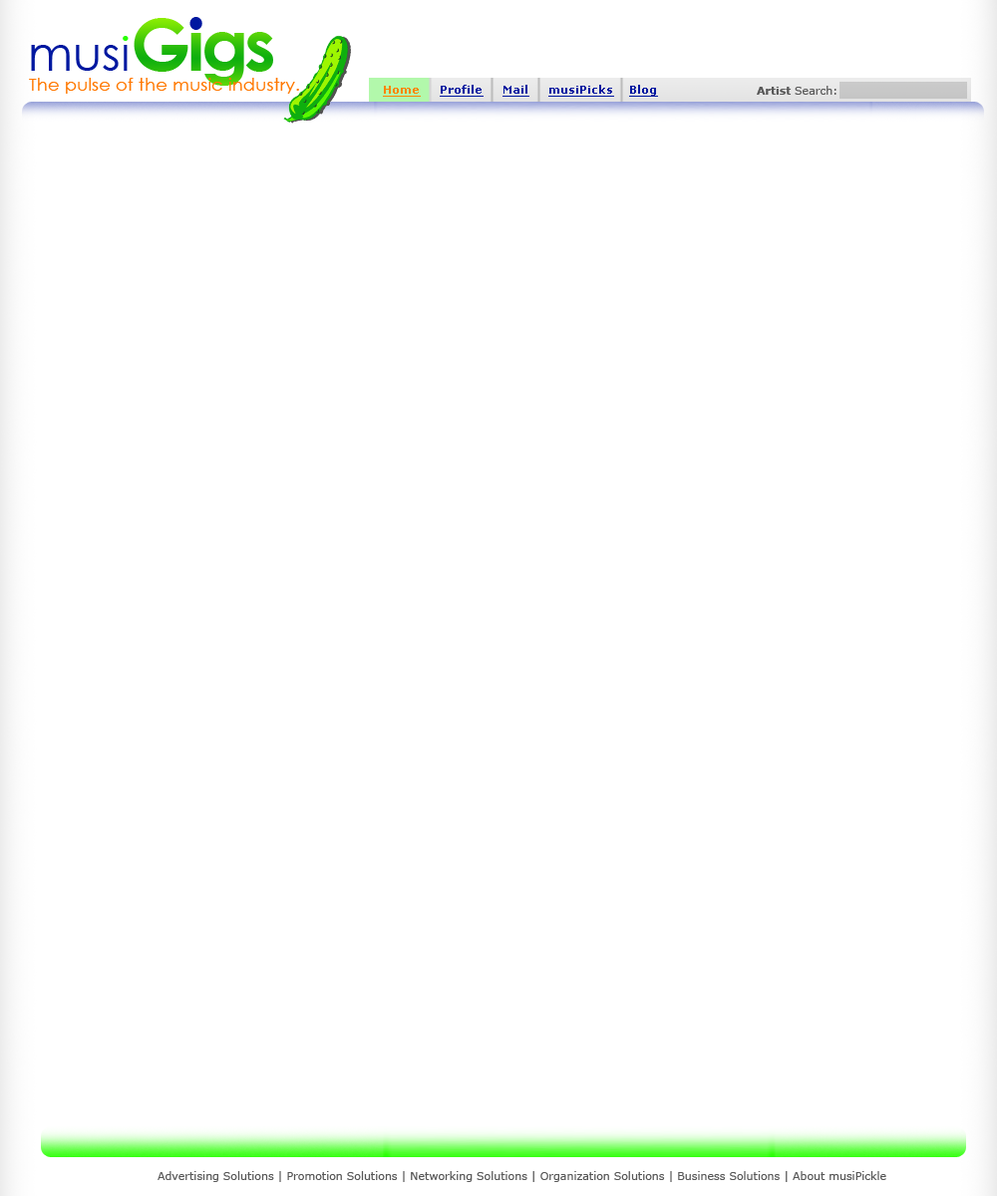
<style>
.page{position:relative;width:997px;height:1196px;background:#ffffff}
.page>*{position:absolute;margin:0}
.t1{font:17.1px "CenturyGothic";color:#ff7800;scale:1.07 1}
.t2{font:11px "Verdana-Bold";color:#0018a0;text-decoration:underline}
.t3{font:11px "Verdana-Bold";color:#0018a0}
.t4{font:11px "Verdana-Bold";color:#ff8400;text-decoration:underline}
.t5{font:11px "Verdana";color:#585858}
.t6{font:11px "Verdana-Bold";color:#585858}
</style>
<div class="page">
<p class="t1" style="left:29px;top:78px;width:270px;height:16px">The pulse of the music industry.</p>
<p class="t2" style="left:383px;top:85px;width:275px;height:12px"><span class="t3"> </span><span class="t4">Home     </span>Profile     Mail     musiPicks    Blog</p>
<p class="t5" style="left:757px;top:86px;width:79px;height:9px"><span class="t6">Artist </span>Search:</p>
<p class="t5" style="left:158px;top:1171px;width:728px;height:11px">Advertising Solutions | Promotion Solutions | Networking Solutions | Organization Solutions | Business Solutions | About musiPickle</p>
</div>
